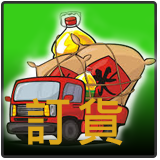
<style>
.page{position:relative;width:160px;height:160px}
.page>*{position:absolute;margin:0}
.t1{font:52.9px "MicrosoftJhengHeiBold";letter-spacing:0.08em;color:#dba71b;scale:0.93 1}
</style>
<div class="page">
<p class="t1" style="left:26px;top:97px;width:97px;height:49px">訂貨</p>
</div>
